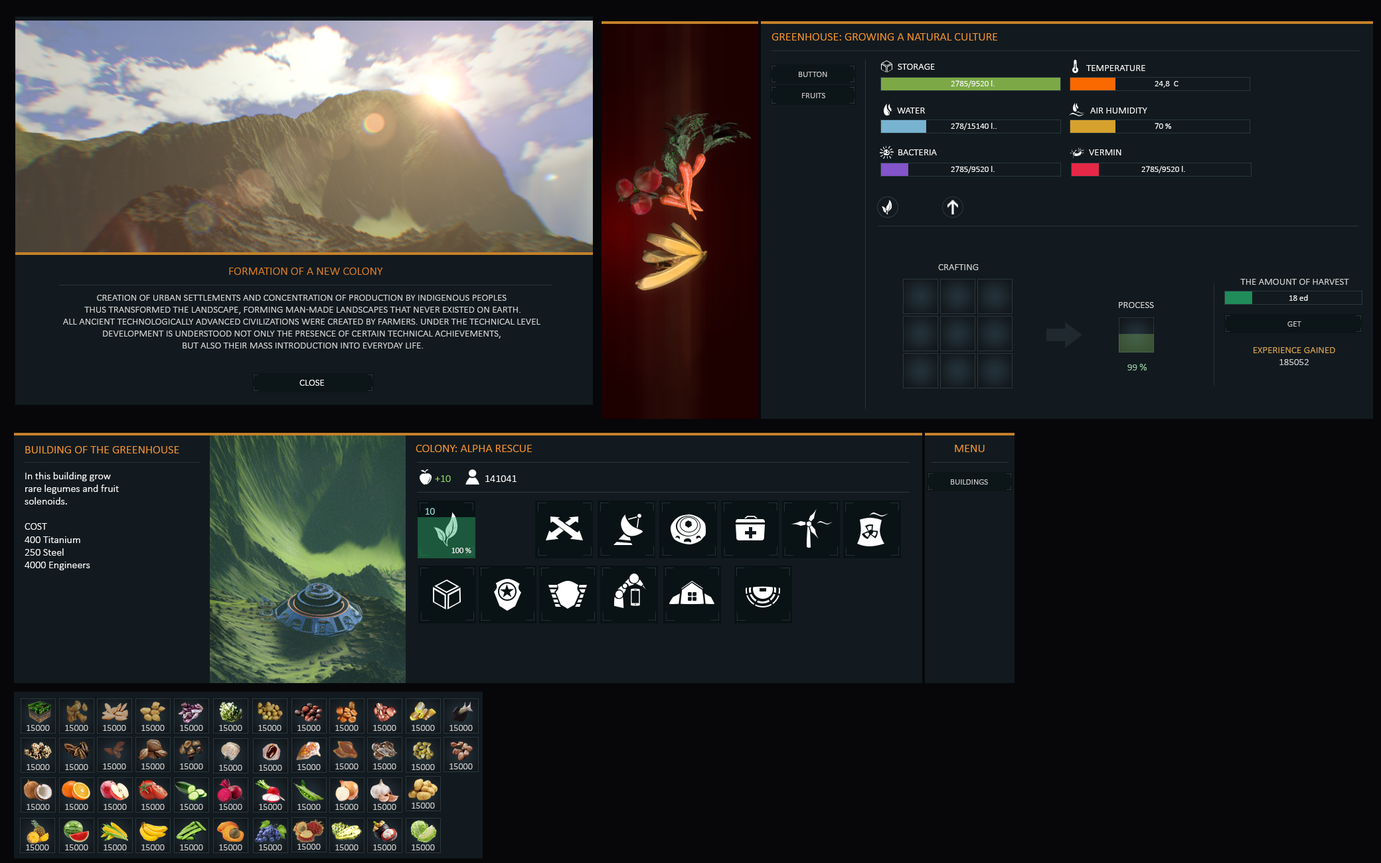
<style>
.page{position:relative;width:1381px;height:863px;background:#121a1f}
.page>*{position:absolute;margin:0}
.t1{font:12px "Calibri-Light";color:#f7962e;text-transform:uppercase}
.t2{font:10px "Calibri-Light";color:#ffffff;text-transform:uppercase}
.t3{font:8.6px "Calibri-Light";color:#c6c5c5;text-transform:uppercase}
.t4{font:8.6px "Calibri-Light";color:#ffffff}
.t5{font:12px "Calibri-Light";color:#d87f27}
.t6{font:10px "Calibri-Light";color:#d6d6d6;text-transform:uppercase}
.t7{font:10px "Calibri-Light";color:#dea954;text-transform:uppercase}
.t8{font:10px "Calibri-Light";color:#99cea5;text-transform:uppercase}
.t9{font:10.6px "Calibri-Light";color:#ffffff}
.t10{font:10.6px "Calibri-Light";color:#94d564;text-transform:uppercase}
.t11{font:10.6px "Calibri-Light";color:#ffffff;text-transform:uppercase}
.t12{font:10px "Calibri-Light";color:#9cece5;text-transform:uppercase}
.t13{font:8.1px "Calibri-Light";color:#ffffff;text-transform:uppercase}
.t14{font:9.3px "Calibri-Light";color:#d2d2d2;text-transform:uppercase}
</style>
<div class="page">
<p class="t1" style="left:772px;top:33px;width:226px;height:8px">Greenhouse: growing a natural culture</p>
<p class="t2" style="left:898px;top:64px;width:37px;height:6px">Storage</p>
<p class="t2" style="left:1086px;top:65px;width:60px;height:6px">Temperature</p>
<p class="t3" style="left:799px;top:72px;width:28px;height:5px">Button</p>
<p class="t4" style="left:951px;top:80px;width:44px;height:8px">2785/9520 l.</p>
<p class="t4" style="left:1155px;top:81px;width:24px;height:7px">24,8  С</p>
<p class="t3" style="left:802px;top:93px;width:23px;height:5px">Fruits</p>
<p class="t2" style="left:897px;top:108px;width:28px;height:6px">Water</p>
<p class="t2" style="left:1090px;top:108px;width:58px;height:6px">Air humidity</p>
<p class="t4" style="left:951px;top:123px;width:46px;height:7px">278/15140 l..</p>
<p class="t4" style="left:1155px;top:123px;width:16px;height:6px">70 %</p>
<p class="t2" style="left:898px;top:149px;width:39px;height:6px">Bacteria</p>
<p class="t2" style="left:1089px;top:149px;width:33px;height:6px">Vermin</p>
<p class="t4" style="left:951px;top:166px;width:44px;height:7px">2785/9520 l.</p>
<p class="t4" style="left:1142px;top:166px;width:43px;height:7px">2785/9520 l.</p>
<p class="t5" style="left:229px;top:268px;width:154px;height:7px">FORMATION OF A NEW COLONY</p>
<p class="t6" style="left:938px;top:264px;width:41px;height:6px">Crafting</p>
<p class="t6" style="left:1240px;top:279px;width:109px;height:6px">the amount of harvest</p>
<p class="t6" style="left:63px;top:295px;width:478px;height:54px;text-align:center">Creation of urban settlements and concentration of production by indigenous peoples <br>thus transformed the landscape, forming man-made landscapes that never existed on Earth.<br>All ancient technologically advanced civilizations were created by farmers. Under the technical level <br>development is understood not only the presence of certain technical achievements, <br>but also their mass introduction into everyday life.</p>
<p class="t6" style="left:1119px;top:302px;width:35px;height:6px">Process</p>
<p class="t4" style="left:1290px;top:295px;width:18px;height:6px">18 ed</p>
<p class="t3" style="left:1288px;top:321px;width:14px;height:6px">get</p>
<p class="t7" style="left:1254px;top:347px;width:81px;height:18px;text-align:center">Experience gained<br><span class="t6">185052</span></p>
<p class="t8" style="left:1128px;top:364px;width:19px;height:7px">99 %</p>
<p class="t2" style="left:299px;top:380px;width:25px;height:6px">close</p>
<p class="t1" style="left:25px;top:446px;width:154px;height:8px">Building of the greenhouse</p>
<p class="t1" style="left:416px;top:445px;width:116px;height:7px">Colony: alpha rescue</p>
<p class="t1" style="left:955px;top:445px;width:30px;height:7px">Menu</p>
<p class="t9" style="left:25px;top:472px;width:94px;height:98px;text-align:right">In this building grow <br>rare legumes and fruit<br>solenoids.<br><br>COST<br>400 Titanium<br>250 Steel<br>4000 Engineers</p>
<p class="t10" style="left:435px;top:475px;width:16px;height:7px">+10</p>
<p class="t11" style="left:485px;top:475px;width:32px;height:7px">141041</p>
<p class="t3" style="left:951px;top:479px;width:37px;height:6px">Buildings</p>
<p class="t12" style="left:426px;top:508px;width:9px;height:7px">10</p>
<p class="t13" style="left:452px;top:548px;width:19px;height:6px">100 %</p>
<p class="t14" style="left:27px;top:725px;width:23px;height:6px">15000</p>
<p class="t14" style="left:65px;top:725px;width:23px;height:6px">15000</p>
<p class="t14" style="left:103px;top:725px;width:23px;height:6px">15000</p>
<p class="t14" style="left:141px;top:725px;width:24px;height:6px">15000</p>
<p class="t14" style="left:180px;top:725px;width:23px;height:6px">15000</p>
<p class="t14" style="left:219px;top:725px;width:23px;height:6px">15000</p>
<p class="t14" style="left:258px;top:725px;width:24px;height:6px">15000</p>
<p class="t14" style="left:298px;top:725px;width:23px;height:6px">15000</p>
<p class="t14" style="left:335px;top:725px;width:24px;height:6px">15000</p>
<p class="t14" style="left:373px;top:725px;width:23px;height:6px">15000</p>
<p class="t14" style="left:412px;top:725px;width:23px;height:6px">15000</p>
<p class="t14" style="left:450px;top:725px;width:23px;height:6px">15000</p>
<p class="t14" style="left:27px;top:764px;width:23px;height:6px">15000</p>
<p class="t14" style="left:65px;top:764px;width:23px;height:6px">15000</p>
<p class="t14" style="left:103px;top:764px;width:23px;height:6px">15000</p>
<p class="t14" style="left:141px;top:764px;width:24px;height:6px">15000</p>
<p class="t14" style="left:180px;top:764px;width:23px;height:6px">15000</p>
<p class="t14" style="left:219px;top:765px;width:23px;height:6px">15000</p>
<p class="t14" style="left:259px;top:765px;width:23px;height:6px">15000</p>
<p class="t14" style="left:298px;top:764px;width:23px;height:6px">15000</p>
<p class="t14" style="left:335px;top:764px;width:24px;height:6px">15000</p>
<p class="t14" style="left:373px;top:764px;width:23px;height:6px">15000</p>
<p class="t14" style="left:412px;top:764px;width:23px;height:6px">15000</p>
<p class="t14" style="left:450px;top:764px;width:23px;height:6px">15000</p>
<p class="t14" style="left:27px;top:804px;width:23px;height:6px">15000</p>
<p class="t14" style="left:65px;top:804px;width:23px;height:6px">15000</p>
<p class="t14" style="left:104px;top:804px;width:23px;height:6px">15000</p>
<p class="t14" style="left:141px;top:804px;width:24px;height:6px">15000</p>
<p class="t14" style="left:180px;top:804px;width:23px;height:6px">15000</p>
<p class="t14" style="left:219px;top:804px;width:23px;height:6px">15000</p>
<p class="t14" style="left:259px;top:804px;width:23px;height:6px">15000</p>
<p class="t14" style="left:298px;top:804px;width:23px;height:6px">15000</p>
<p class="t14" style="left:335px;top:804px;width:24px;height:6px">15000</p>
<p class="t14" style="left:373px;top:804px;width:23px;height:6px">15000</p>
<p class="t14" style="left:412px;top:803px;width:23px;height:6px">15000</p>
<p class="t14" style="left:26px;top:845px;width:23px;height:6px">15000</p>
<p class="t14" style="left:65px;top:845px;width:23px;height:6px">15000</p>
<p class="t14" style="left:104px;top:845px;width:23px;height:6px">15000</p>
<p class="t14" style="left:141px;top:845px;width:24px;height:6px">15000</p>
<p class="t14" style="left:180px;top:845px;width:23px;height:6px">15000</p>
<p class="t14" style="left:219px;top:845px;width:23px;height:6px">15000</p>
<p class="t14" style="left:259px;top:845px;width:23px;height:6px">15000</p>
<p class="t14" style="left:298px;top:844px;width:23px;height:6px">15000</p>
<p class="t14" style="left:335px;top:845px;width:24px;height:6px">15000</p>
<p class="t14" style="left:373px;top:845px;width:23px;height:6px">15000</p>
<p class="t14" style="left:412px;top:845px;width:23px;height:6px">15000</p>
</div>
